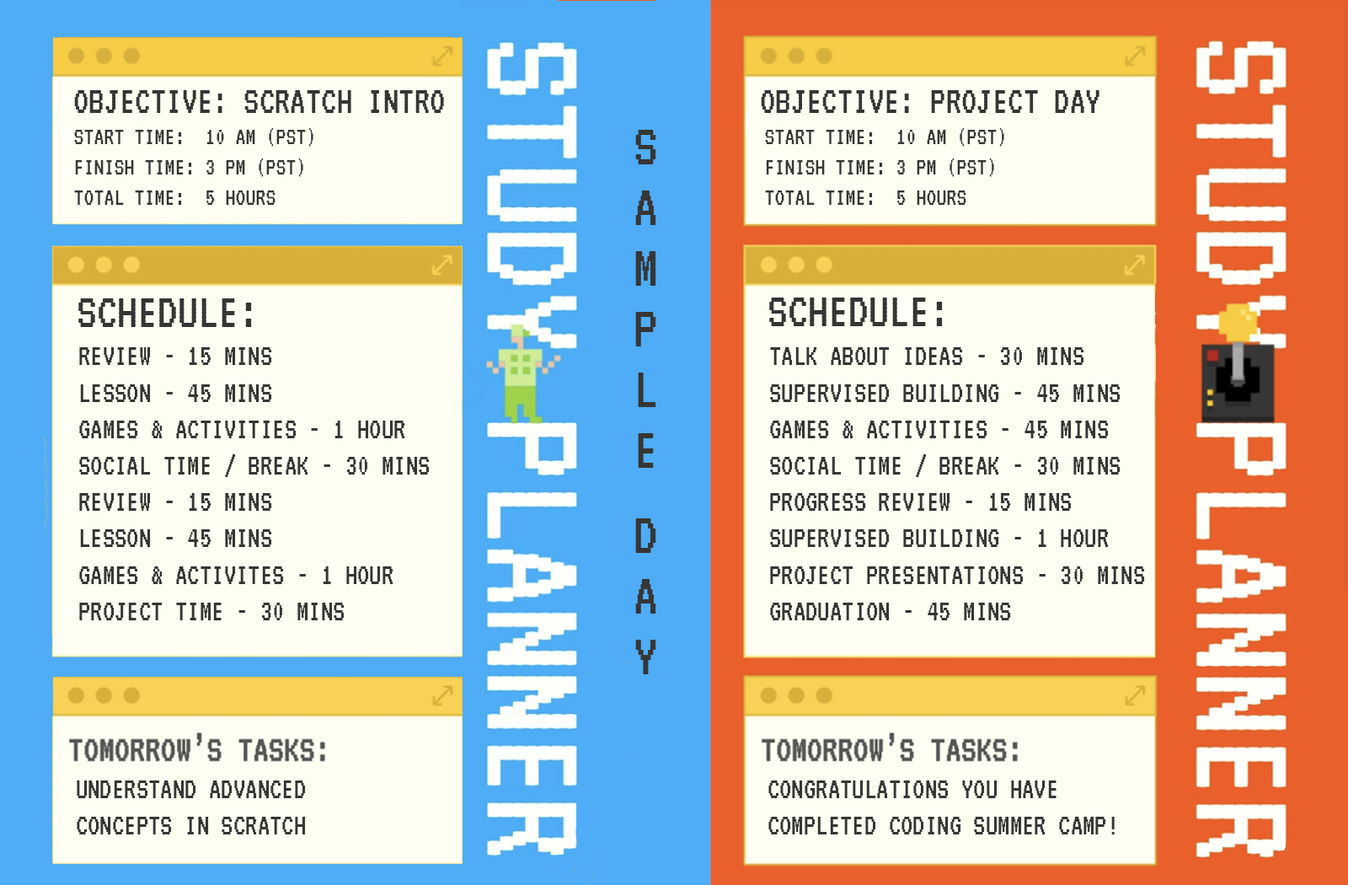
<style>
.page{position:relative;width:1348px;height:885px;background:#fffef2}
.page>*{position:absolute;margin:0}
.t1{font:38.8px "VT323-Regular";color:#373635}
.t2{font:25.3px "VT323-Regular";color:#373635}
.t3{font:60.7px "VT323-Regular";color:#373635}
.t4{font:50.5px "VT323-Regular";color:#373635}
.t5{font:30.3px "VT323-Regular";color:#373635}
</style>
<div class="page">
<p class="t1" style="left:74px;top:90px;width:370px;height:23px">OBJECTIVE: SCRATCH INTRO</p>
<p class="t1" style="left:761px;top:90px;width:338px;height:23px">OBJECTIVE: PROJECT DAY</p>
<p class="t2" style="left:74px;top:128px;width:239px;height:77px">START TIME:  10 AM (PST)<br>FINISH TIME: 3 PM (PST)<br>TOTAL TIME:  5 HOURS</p>
<p class="t3" style="left:635px;top:130px;width:21px;height:544px;text-align:center">SAMPLE DAY</p>
<p class="t2" style="left:765px;top:128px;width:239px;height:77px">START TIME:  10 AM (PST)<br>FINISH TIME: 3 PM (PST)<br>TOTAL TIME:  5 HOURS</p>
<p class="t4" style="left:78px;top:298px;width:174px;height:29px">SCHEDULE:</p>
<p class="t4" style="left:769px;top:297px;width:174px;height:29px">SCHEDULE:</p>
<p class="t5" style="left:79px;top:347px;width:351px;height:273px">REVIEW - 15 MINS<br>LESSON - 45 MINS<br>GAMES &amp; ACTIVITIES - 1 HOUR<br>SOCIAL TIME / BREAK - 30 MINS<br>REVIEW - 15 MINS<br>LESSON - 45 MINS<br>GAMES &amp; ACTIVITES - 1 HOUR<br>PROJECT TIME - 30 MINS</p>
<p class="t5" style="left:770px;top:347px;width:375px;height:273px">TALK ABOUT IDEAS - 30 MINS<br>SUPERVISED BUILDING - 45 MINS<br>GAMES &amp; ACTIVITIES - 45 MINS<br>SOCIAL TIME / BREAK - 30 MINS<br>PROGRESS REVIEW - 15 MINS<br>SUPERVISED BUILDING - 1 HOUR<br>PROJECT PRESENTATIONS - 30 MINS<br>GRADUATION - 45 MINS</p>
<p class="t5" style="left:77px;top:780px;width:229px;height:54px">UNDERSTAND ADVANCED <br>CONCEPTS IN SCRATCH</p>
<p class="t5" style="left:768px;top:780px;width:347px;height:54px">CONGRATULATIONS YOU HAVE <br>COMPLETED CODING SUMMER CAMP!</p>
</div>
